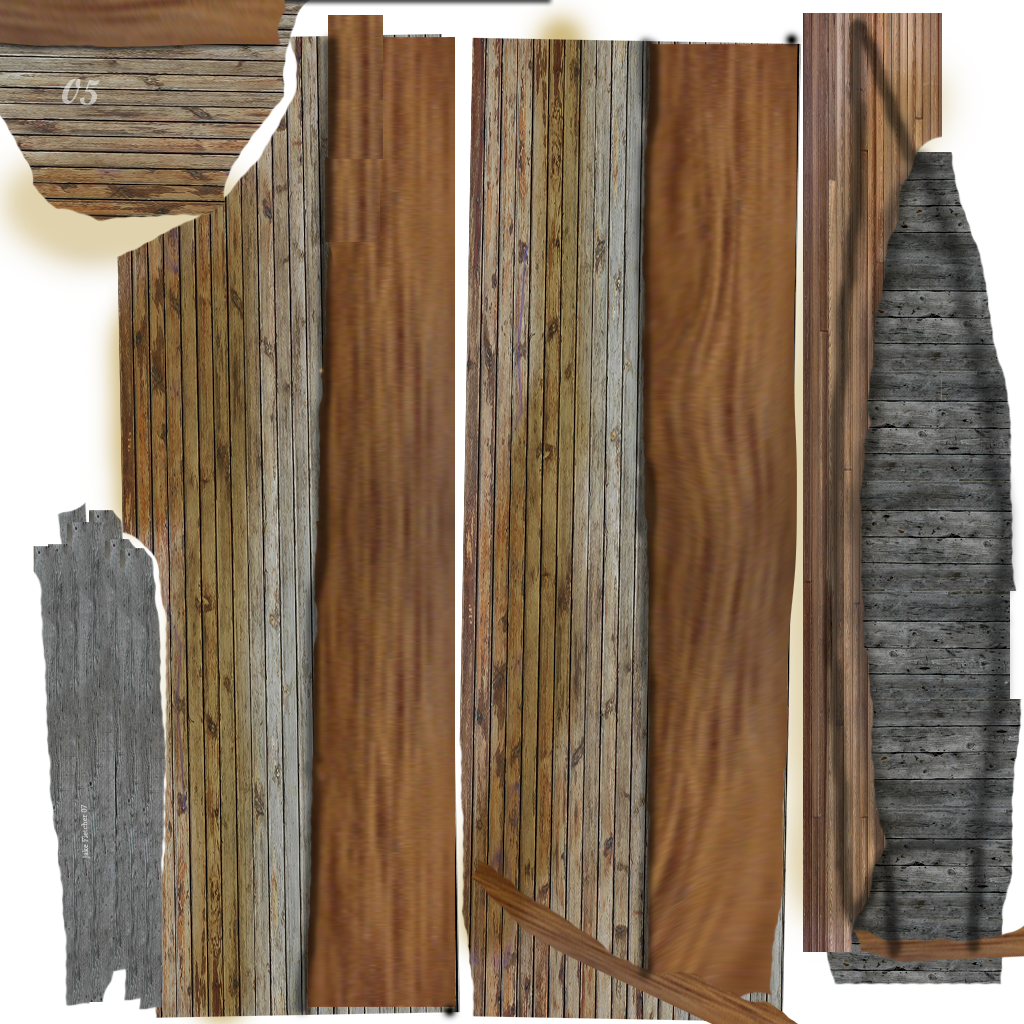
<style>
.page{position:relative;width:1024px;height:1024px}
.page>*{position:absolute;margin:0}
.t1{font:8px "Sylfaen";color:#cecece}
</style>
<div class="page">
<p class="t1" style="left:81px;top:804px;width:9px;height:55px;rotate:-92deg">Jake Fletcher 07<br> <br>erer</p>
</div>
